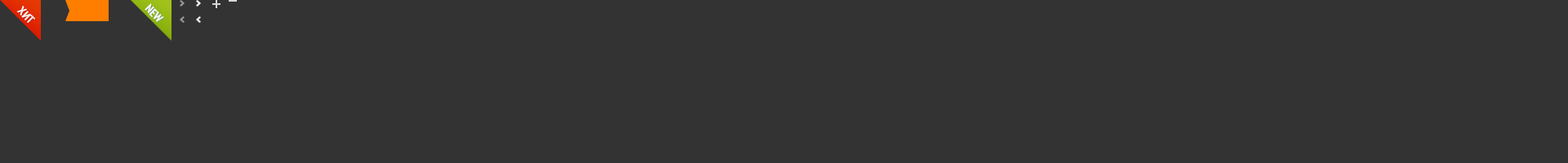
<style>
.page{position:relative;width:1568px;height:163px;background:#333333}
.page>*{position:absolute;margin:0}
.t1{font:11.4px "PTSans-NarrowBold";color:#ffffff}
</style>
<div class="page">
<p class="t1" style="left:16px;top:6px;width:19px;height:17px">ХИТ</p>
<p class="t1" style="left:145px;top:3px;width:19px;height:19px">NEW</p>
</div>
